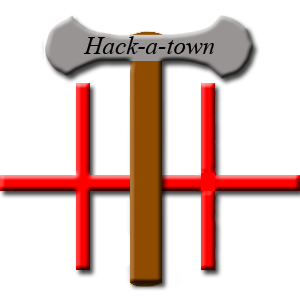
<style>
.page{position:relative;width:300px;height:300px;background:#ffffff}
.page>*{position:absolute;margin:0}
.t1{font:25px "TimesNewRomanPS-ItalicMT";color:#000000}
</style>
<div class="page">
<p class="t1" style="left:83px;top:36px;width:131px;height:18px">Hack-a-town</p>
</div>
